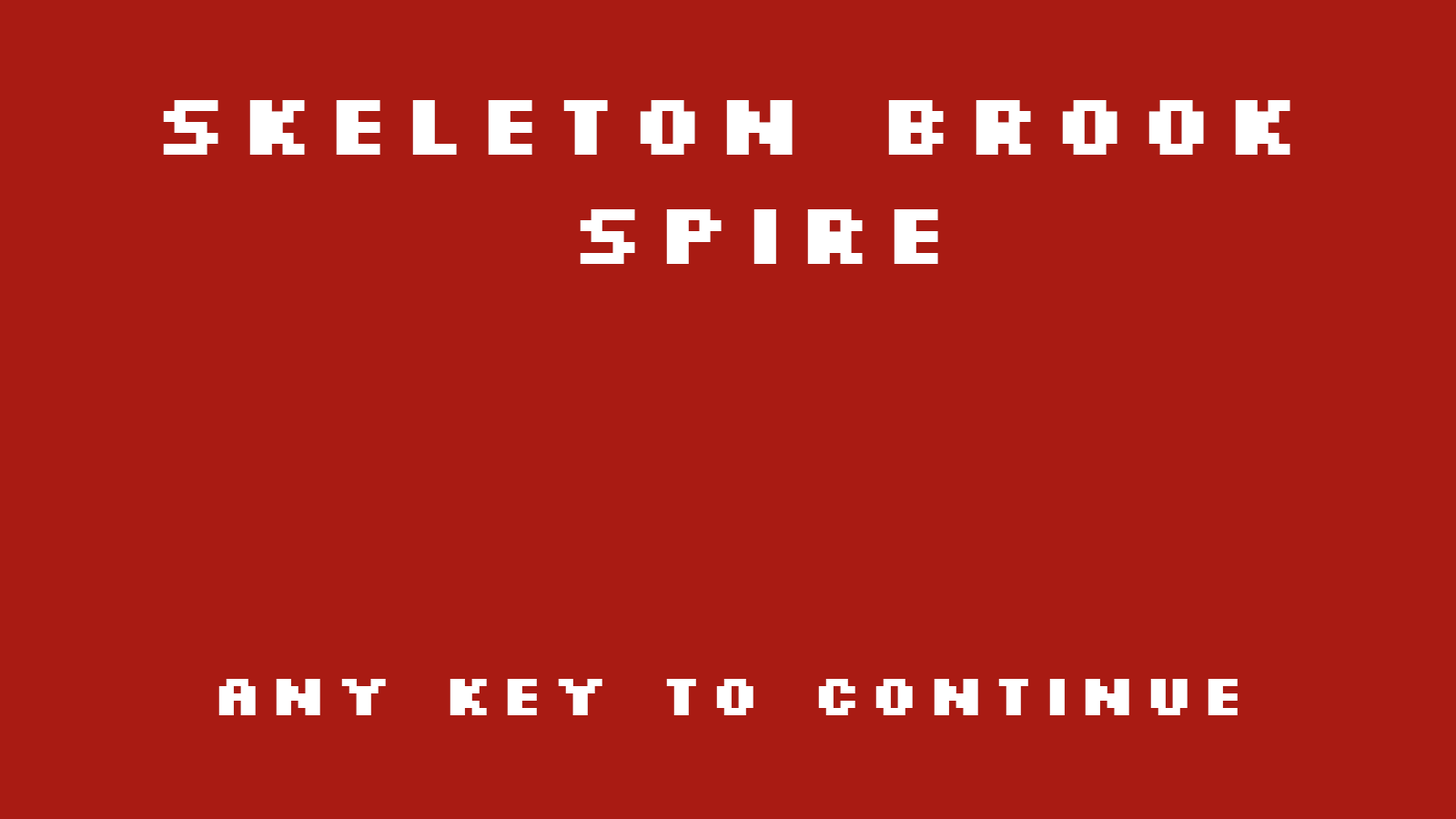
<style>
.page{position:relative;width:1456px;height:819px;background:#a91b13}
.page>*{position:absolute;margin:0}
.t1{font:91px "Silkscreen-ExpandedBold";color:#ffffff}
.t2{font:60.7px "Silkscreen-ExpandedBold";color:#ffffff}
</style>
<div class="page">
<p class="t1" style="left:163px;top:100px;width:1127px;height:164px;text-align:center">Skeleton Brook <br>Spire</p>
<p class="t2" style="left:218px;top:679px;width:1020px;height:36px">Any Key to continue</p>
</div>
